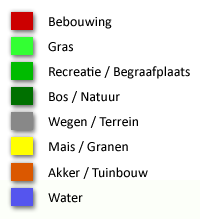
<style>
.page{position:relative;width:200px;height:219px;background:#ffffff}
.page>*{position:absolute;margin:0}
.t1{font:14px "Calibri";color:#000000}
</style>
<div class="page">
<p class="t1" style="left:49px;top:16px;width:63px;height:13px">Bebouwing</p>
<p class="t1" style="left:48px;top:42px;width:25px;height:10px">Gras</p>
<p class="t1" style="left:49px;top:66px;width:141px;height:13px">Recreatie / Begraafplaats</p>
<p class="t1" style="left:49px;top:91px;width:71px;height:12px">Bos / Natuur</p>
<p class="t1" style="left:48px;top:116px;width:90px;height:13px">Wegen / Terrein</p>
<p class="t1" style="left:49px;top:141px;width:79px;height:12px">Mais / Granen</p>
<p class="t1" style="left:48px;top:167px;width:100px;height:12px">Akker / Tuinbouw</p>
<p class="t1" style="left:48px;top:193px;width:35px;height:10px">Water</p>
</div>
